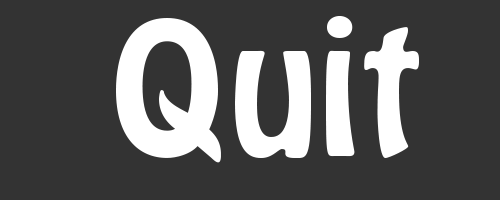
<style>
.page{position:relative;width:500px;height:200px;background:#333333}
.page>*{position:absolute;margin:0}
.t1{font:163.9px "HoboStd";color:#ffffff}
</style>
<div class="page">
<p class="t1" style="left:116px;top:16px;width:303px;height:147px">Quit</p>
</div>
